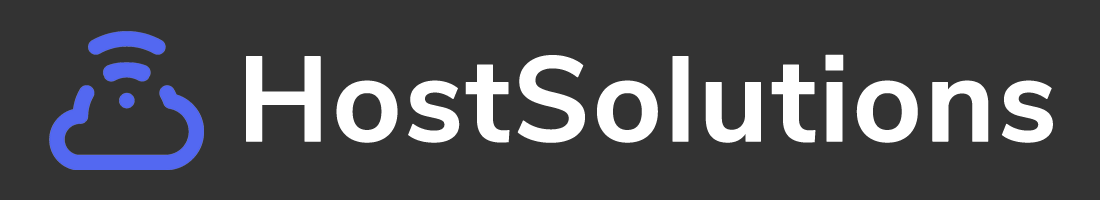
<style>
.page{position:relative;width:1100px;height:200px;background:#333333}
.page>*{position:absolute;margin:0}
.t1{font:120px "NunitoSans-Bold";color:#ffffff;font-weight:bold}
</style>
<div class="page">
<p class="t1" style="left:246px;top:54px;width:807px;height:89px">HostSolutions</p>
</div>
